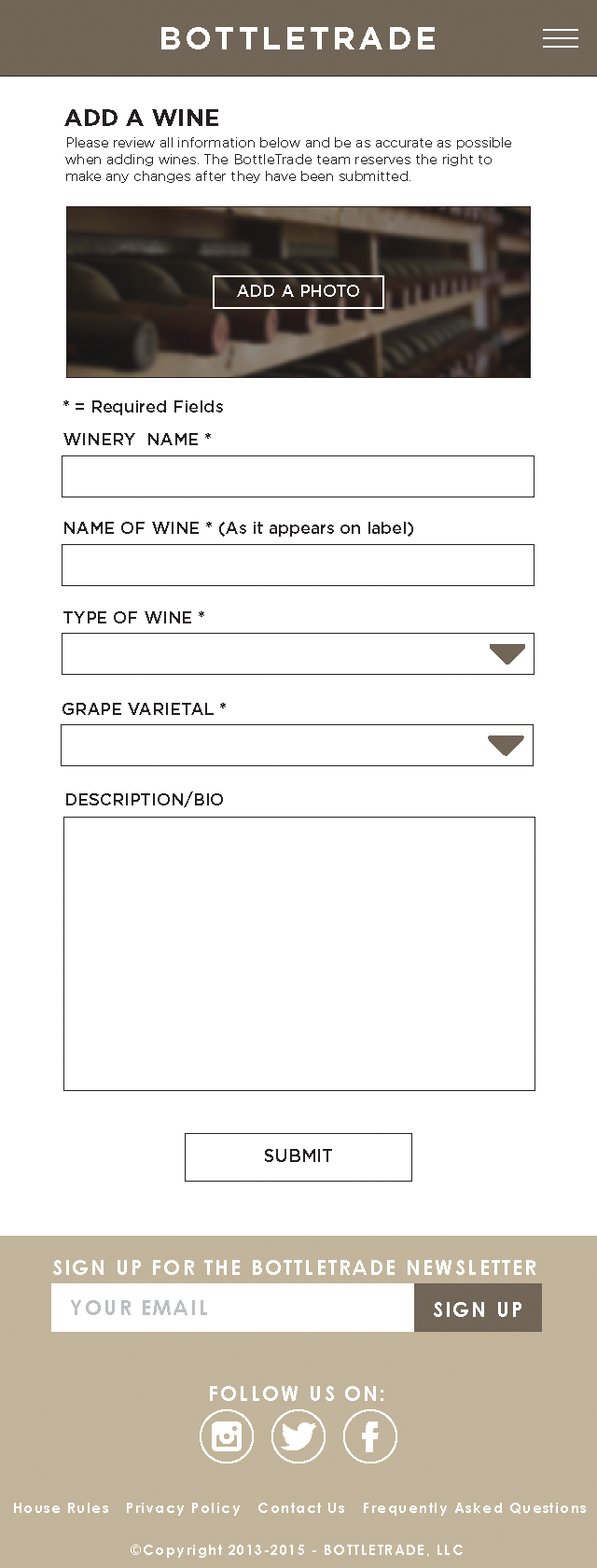
<style>
.page{position:relative;width:597px;height:1568px;background:#ffffff}
.page>*{position:absolute;margin:0}
.t1{font:31.7px "Gotham-Bold";letter-spacing:0.099em;color:#ffffff}
.t2{font:23.3px "Gotham-Bold";color:#231f20}
.t3{font:14px "Gotham-Book";color:#231f20}
.t4{font:16.8px "Gotham-Medium";color:#ffffff}
.t5{font:17px "Gotham-Medium";color:#231f20}
.t6{font:17.7px "Gotham-Medium";color:#231f20}
.t7{font:20.5px "CenturyGothic-Bold";letter-spacing:0.099em;color:#ffffff}
.t8{font:20.5px "CenturyGothic-Bold";letter-spacing:0.099em;color:#bcbec0}
.t9{font:14px "CenturyGothic-Bold";letter-spacing:0.099em;color:#ffffff}
</style>
<div class="page">
<p class="t1" style="left:161px;top:27px;width:274px;height:22px">BOTTLETRADE</p>
<p class="t2" style="left:64px;top:109px;width:154px;height:17px">ADD A WINE</p>
<p class="t3" style="left:65px;top:137px;width:446px;height:46px">Please review all information below and be as accurate as possible when adding wines. The BottleTrade team reserves the right to make any changes after they have been submitted.</p>
<p class="t4" style="left:237px;top:285px;width:122px;height:12px">ADD A PHOTO</p>
<p class="t5" style="left:63px;top:400px;width:160px;height:15px">* = Required Fields</p>
<p class="t5" style="left:63px;top:433px;width:148px;height:12px">WINERY  NAME *</p>
<p class="t5" style="left:64px;top:522px;width:349px;height:15px">NAME OF WINE * (As it appears on label)</p>
<p class="t5" style="left:63px;top:611px;width:141px;height:12px">TYPE OF WINE *</p>
<p class="t5" style="left:63px;top:703px;width:163px;height:12px">GRAPE VARIETAL *</p>
<p class="t5" style="left:66px;top:791px;width:157px;height:16px">DESCRIPTION/BIO</p>
<p class="t6" style="left:265px;top:1149px;width:67px;height:13px">SUBMIT</p>
<p class="t7" style="left:53px;top:1260px;width:483px;height:15px">SIGN UP FOR THE BOTTLETRADE NEWSLETTER</p>
<p class="t8" style="left:71px;top:1300px;width:136px;height:15px">YOUR EMAIL</p>
<p class="t7" style="left:434px;top:1302px;width:88px;height:15px">SIGN UP</p>
<p class="t7" style="left:210px;top:1386px;width:174px;height:15px">FOLLOW US ON:</p>
<p class="t9" style="left:14px;top:1503px;width:94px;height:10px">House Rules</p>
<p class="t9" style="left:127px;top:1503px;width:113px;height:13px">Privacy Policy</p>
<p class="t9" style="left:259px;top:1503px;width:85px;height:10px">Contact Us</p>
<p class="t9" style="left:364px;top:1503px;width:222px;height:13px">Frequently Asked Questions</p>
<p class="t9" style="left:131px;top:1545px;width:332px;height:13px">©Copyright 2013-2015 - BOTTLETRADE, LLC</p>
</div>
